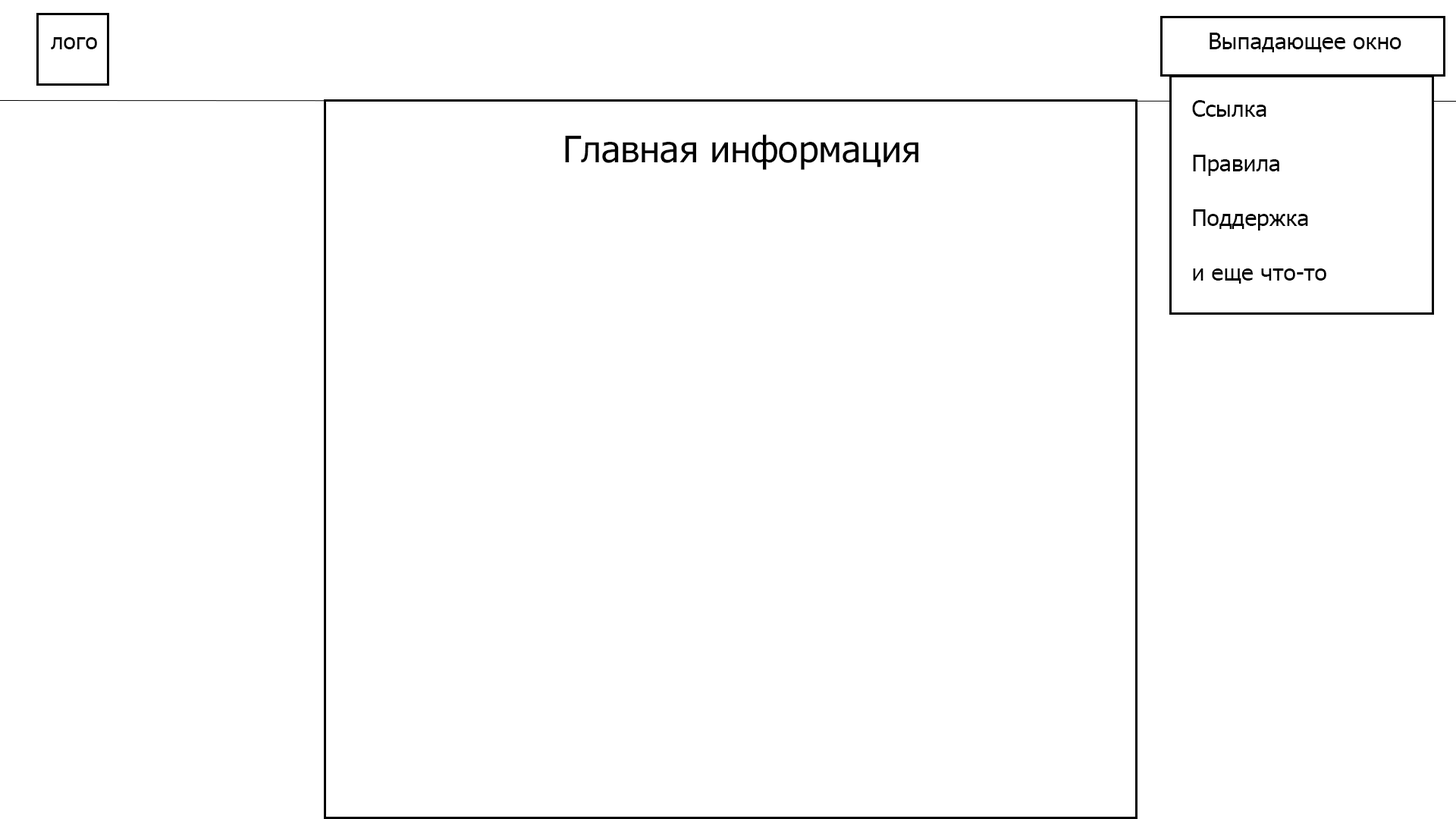
<style>
.page{position:relative;width:1456px;height:819px;background:#ffffff}
.page>*{position:absolute;margin:0}
.t1{font:22.7px "Tahoma";color:#010101}
.t2{font:22.7px "Tahoma";color:#000000}
.t3{font:36.4px "Tahoma";color:#000000}
</style>
<div class="page">
<p class="t1" style="left:51px;top:37px;width:46px;height:12px">лого</p>
<p class="t2" style="left:1210px;top:33px;width:191px;height:19px">Выпадающее окно</p>
<p class="t2" style="left:1192px;top:100px;width:134px;height:184px">Ссылка<br><br>Правила<br><br>Поддержка<br><br>и еще что-то</p>
<p class="t3" style="left:565px;top:134px;width:353px;height:36px">Главная информация</p>
</div>
